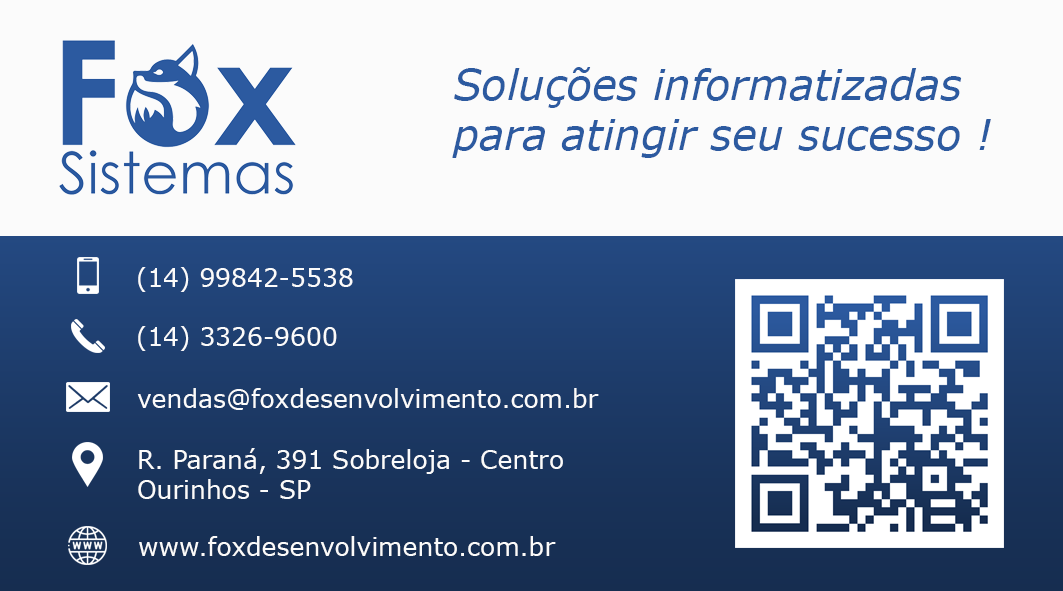
<style>
.page{position:relative;width:1063px;height:591px;background:#fbfbfb}
.page>*{position:absolute;margin:0}
.t1{font:41.7px "Verdana-Italic";color:#2c5aa0}
.t2{font:25px "Verdana";color:#fbfbfb}
</style>
<div class="page">
<p class="t1" style="left:452px;top:67px;width:539px;height:91px">Soluções informatizadas <br>para atingir seu sucesso !</p>
<p class="t2" style="left:138px;top:267px;width:215px;height:25px">(14) 99842-5538</p>
<p class="t2" style="left:138px;top:326px;width:199px;height:25px">(14) 3326-9600</p>
<p class="t2" style="left:137px;top:388px;width:462px;height:22px">vendas@foxdesenvolvimento.com.br</p>
<p class="t2" style="left:138px;top:448px;width:425px;height:51px">R. Paraná, 391 Sobreloja - Centro <br>Ourinhos - SP</p>
<p class="t2" style="left:139px;top:536px;width:417px;height:20px">www.foxdesenvolvimento.com.br</p>
</div>
